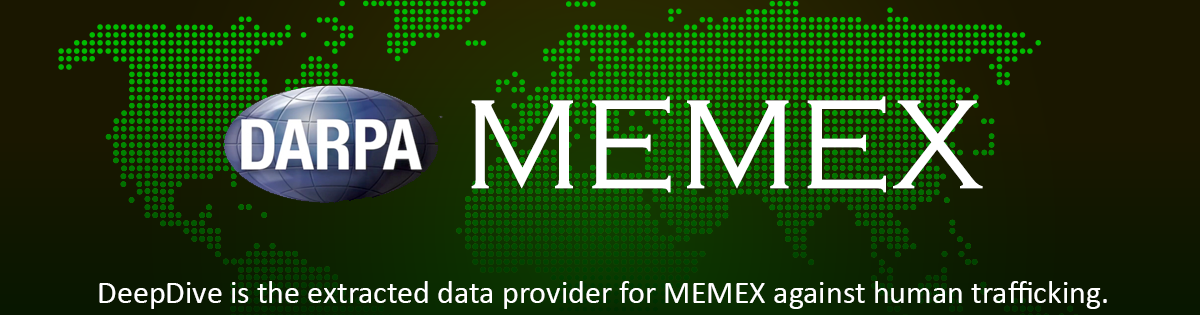
<style>
.page{position:relative;width:1200px;height:315px}
.page>*{position:absolute;margin:0}
.t1{font:131.1px "CopperplateGothic-Light";color:#ffffff}
.t2{font:32px "Calibri";color:#ffffff}
</style>
<div class="page">
<p class="t1" style="left:471px;top:96px;width:512px;height:97px">MEMEX</p>
<p class="t2" style="left:99px;top:281px;width:1008px;height:28px">DeepDive is the extracted data provider for MEMEX against human trafficking.</p>
</div>
